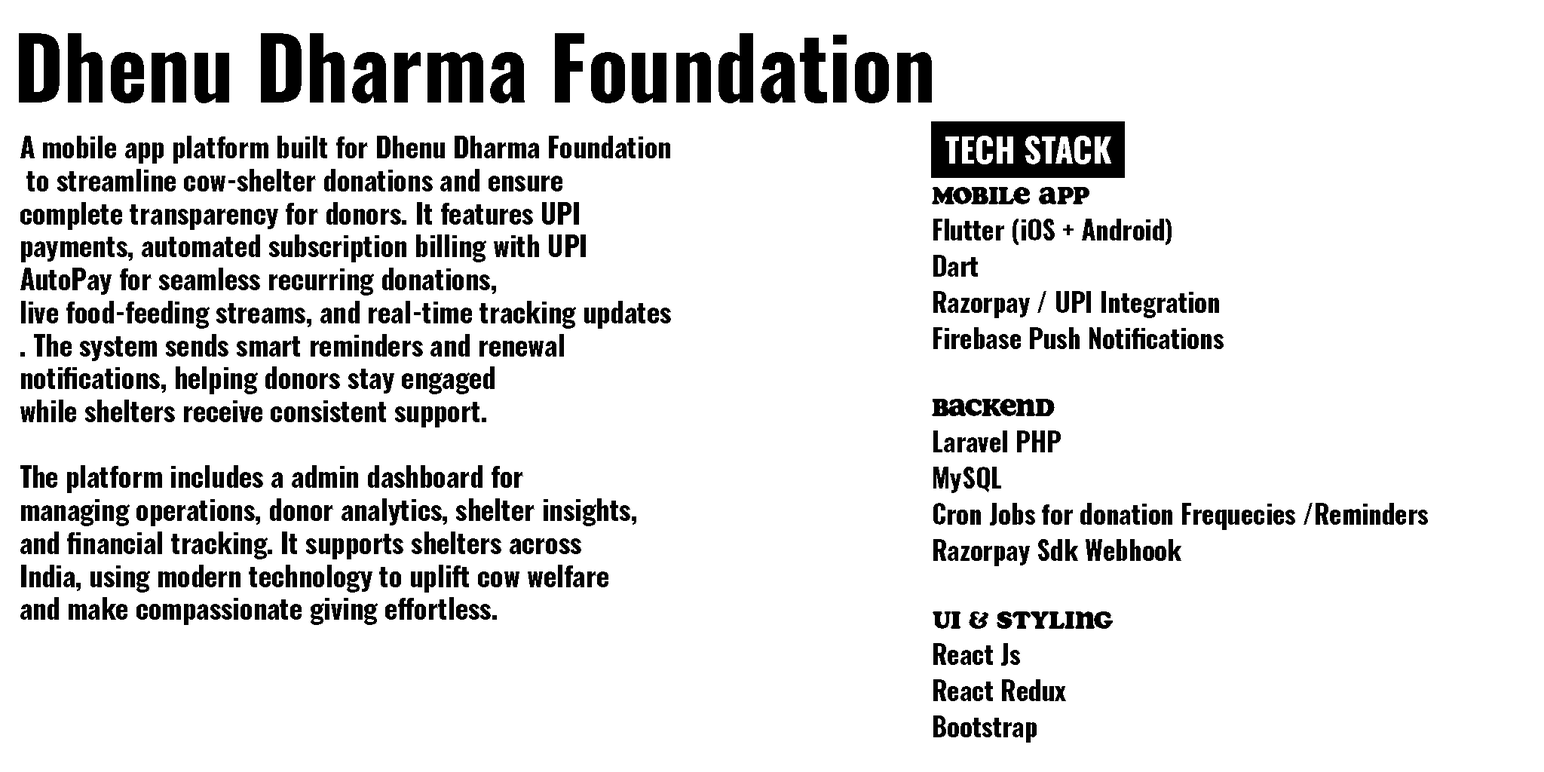
<style>
.page{position:relative;width:1544px;height:772px;background:#ffffff}
.page>*{position:absolute;margin:0}
.t1{font:85.6px "Oswald-Bold";color:#000000}
.t2{font:27.5px "Oswald-Bold";color:#000000}
.t3{font:33.9px "Oswald-Bold";color:#ffffff}
.t4{font:26.3px/36.2px "Oswald-Bold";color:#000000}
.t5{font:26.3px/36.2px "Soap-Regular";color:#000000}
</style>
<div class="page">
<p class="t1" style="left:19px;top:33px;width:913px;height:70px">Dhenu Dharma Foundation</p>
<p class="t2" style="left:20px;top:136px;width:651px;height:489px">A mobile app platform built for Dhenu Dharma Foundation<br> to streamline cow-shelter donations and ensure <br>complete transparency for donors. It features UPI <br>payments, automated subscription billing with UPI <br>AutoPay for seamless recurring donations, <br>live food-feeding streams, and real-time tracking updates<br>. The system sends smart reminders and renewal <br>notifications, helping donors stay engaged <br>while shelters receive consistent support.<br><br>The platform includes a admin dashboard for <br>managing operations, donor analytics, shelter insights, <br>and financial tracking. It supports shelters across <br>India, using modern technology to uplift cow welfare <br>and make compassionate giving effortless.</p>
<p class="t3" style="left:946px;top:136px;width:165px;height:28px">TECH STACK</p>
<p class="t4" style="left:932px;top:187px;width:496px;height:556px"><span class="t5">MOBILE APP<br></span>Flutter (iOS + Android)<br>Dart<br>Razorpay / UPI Integration<br>Firebase Push Notifications<br><br><span class="t5">BACKEND<br></span>Laravel PHP<br>MySQL<br>Cron Jobs for donation Frequecies /Reminders<br>Razorpay Sdk Webhook <br><br><span class="t5">UI &amp; Styling</span> <br>React Js <br>React Redux <br>Bootstrap</p>
</div>
